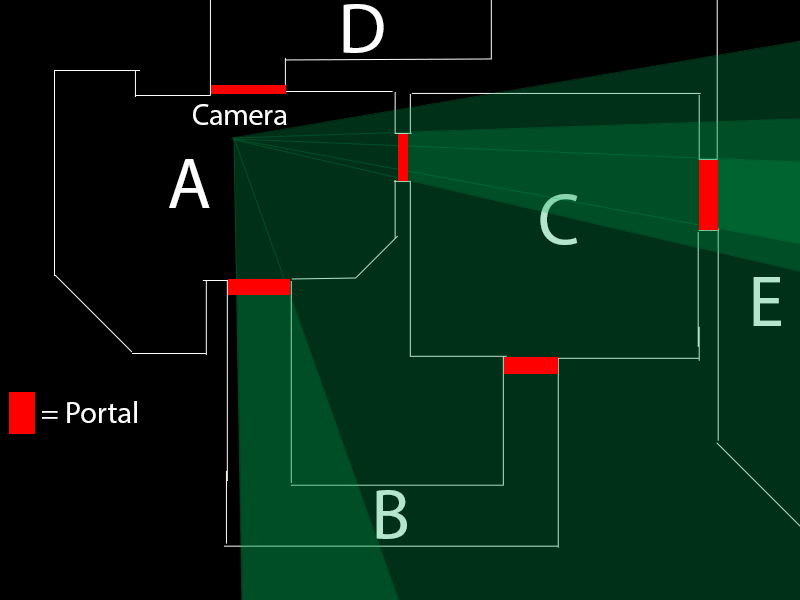
<style>
.page{position:relative;width:800px;height:600px;background:#003018}
.page>*{position:absolute;margin:0}
.t1{font:72px "MyriadPro-Regular";color:#ffffff}
.t2{font:30px "MyriadPro-Regular";color:#ffffff}
.t3{font:72px "MyriadPro-Regular"}
.t4{font:72px "MyriadPro-Regular";color:#b5e5cd}
</style>
<div class="page">
<p class="t1" style="left:343px;top:4px;width:41px;height:49px">D</p>
<p class="t2" style="left:193px;top:104px;width:94px;height:21px">Camera</p>
<p class="t1" style="left:169px;top:159px;width:41px;height:49px">A</p>
<p class="t3" style="left:540px;top:194px;width:38px;height:51px">C</p>
<p class="t4" style="left:753px;top:277px;width:28px;height:49px">E</p>
<p class="t2" style="left:42px;top:401px;width:95px;height:22px">= Portal</p>
<p class="t4" style="left:376px;top:490px;width:31px;height:49px">B</p>
</div>
